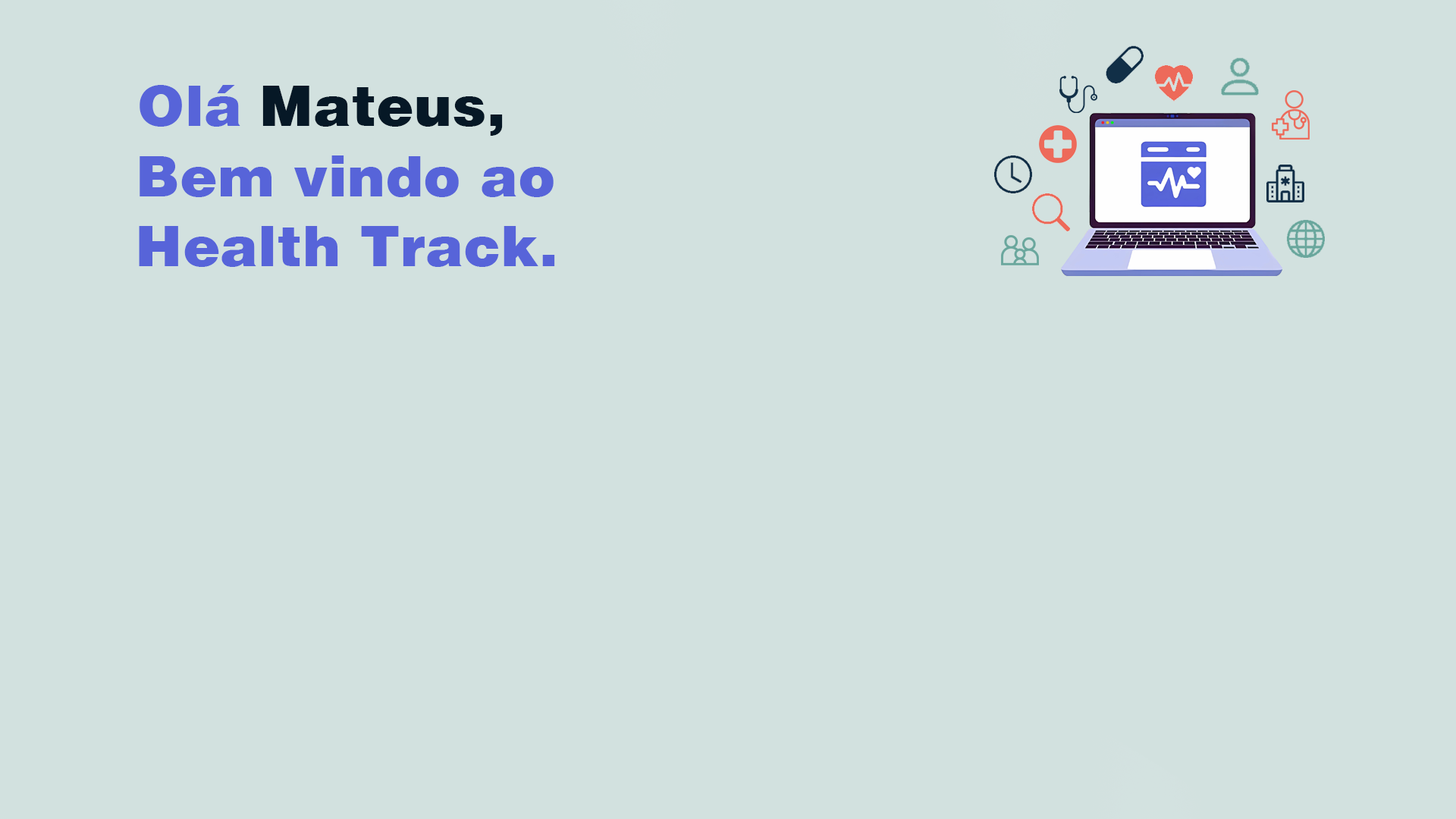
<style>
.page{position:relative;width:1456px;height:819px;background:#d2e1df}
.page>*{position:absolute;margin:0}
.t1{font:56.9px "Helvetica-Black";color:#5764d9}
.t2{font:56.9px "Helvetica-Black";color:#061826}
</style>
<div class="page">
<p class="t1" style="left:140px;top:85px;width:100px;height:42px">Olá</p>
<p class="t2" style="left:262px;top:86px;width:241px;height:50px">Mateus,</p>
<p class="t1" style="left:140px;top:155px;width:414px;height:42px">Bem vindo ao</p>
<p class="t1" style="left:139px;top:226px;width:416px;height:41px">Health Track.</p>
</div>
